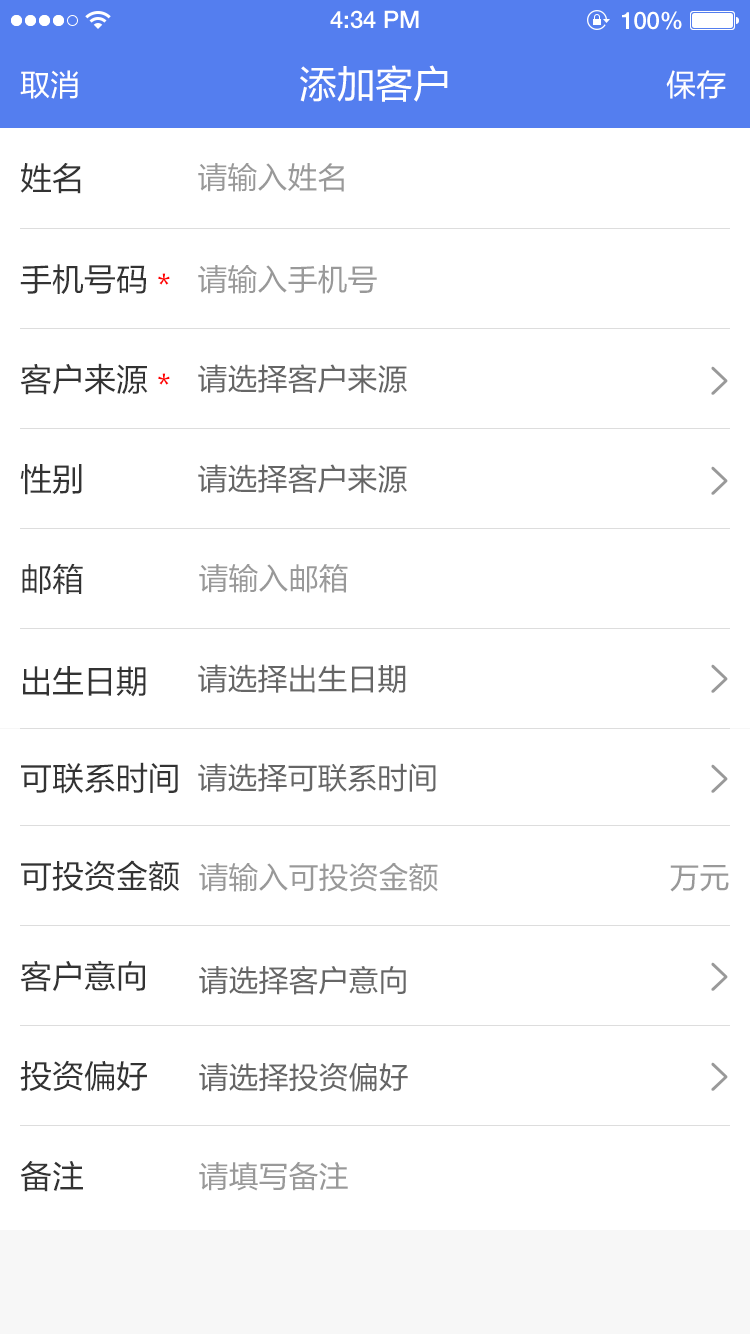
<style>
.page{position:relative;width:750px;height:1334px;background:#ffffff}
.page>*{position:absolute;margin:0}
.t1{font:24px "HelveticaNeueLTPro-Md";color:#ffffff}
.t2{font:38px "FZLTHJW-GB1-0";color:#ffffff}
.t3{font:30px "FZLTHJW-GB1-0";color:#ffffff}
.t4{font:32px "FZLTHJW-GB1-0";color:#333333}
.t5{font:30px "FZLTHJW-GB1-0";color:#999999}
.t6{font:30px "FZLTHJW-GB1-0";color:#ff0000}
.t7{font:30px "FZLTHJW-GB1-0";color:#666666}
</style>
<div class="page">
<p class="t1" style="left:330px;top:10px;width:89px;height:19px">4:34 PM</p>
<p class="t1" style="left:622px;top:11px;width:60px;height:19px">100%</p>
<p class="t2" style="left:300px;top:65px;width:148px;height:37px">添加客户</p>
<p class="t3" style="left:20px;top:70px;width:58px;height:29px">取消</p>
<p class="t3" style="left:666px;top:70px;width:60px;height:29px">保存</p>
<p class="t4" style="left:20px;top:163px;width:61px;height:31px">姓名</p>
<p class="t5" style="left:198px;top:163px;width:146px;height:29px">请输入姓名</p>
<p class="t4" style="left:20px;top:264px;width:126px;height:30px">手机号码</p>
<p class="t5" style="left:198px;top:265px;width:179px;height:29px">请输入手机号</p>
<p class="t6" style="left:158px;top:273px;width:12px;height:12px">*</p>
<p class="t4" style="left:20px;top:363px;width:128px;height:32px">客户来源</p>
<p class="t7" style="left:198px;top:364px;width:209px;height:29px">请选择客户来源</p>
<p class="t6" style="left:158px;top:373px;width:12px;height:12px">*</p>
<p class="t4" style="left:20px;top:464px;width:62px;height:31px">性别</p>
<p class="t7" style="left:198px;top:464px;width:209px;height:29px">请选择客户来源</p>
<p class="t4" style="left:22px;top:563px;width:61px;height:31px">邮箱</p>
<p class="t5" style="left:199px;top:564px;width:149px;height:29px">请输入邮箱</p>
<p class="t7" style="left:198px;top:664px;width:208px;height:29px">请选择出生日期</p>
<p class="t4" style="left:23px;top:666px;width:123px;height:31px">出生日期</p>
<p class="t4" style="left:21px;top:762px;width:157px;height:32px">可联系时间</p>
<p class="t7" style="left:198px;top:763px;width:238px;height:29px">请选择可联系时间</p>
<p class="t4" style="left:21px;top:860px;width:158px;height:32px">可投资金额</p>
<p class="t5" style="left:199px;top:862px;width:239px;height:30px">请输入可投资金额</p>
<p class="t5" style="left:670px;top:865px;width:59px;height:27px">万元</p>
<p class="t4" style="left:20px;top:960px;width:125px;height:32px">客户意向</p>
<p class="t7" style="left:199px;top:966px;width:207px;height:29px">请选择客户意向</p>
<p class="t4" style="left:20px;top:1060px;width:127px;height:31px">投资偏好</p>
<p class="t7" style="left:199px;top:1063px;width:209px;height:29px">请选择投资偏好</p>
<p class="t4" style="left:20px;top:1161px;width:63px;height:31px">备注</p>
<p class="t5" style="left:199px;top:1161px;width:149px;height:30px">请填写备注</p>
</div>
